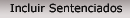
<style>
.page{position:relative;width:130px;height:18px}
.page>*{position:absolute;margin:0}
.t1{font:11px "Verdana";color:#131212}
</style>
<div class="page">
<p class="t1" style="left:10px;top:3px;width:112px;height:10px">Incluir Sentenciados</p>
</div>
